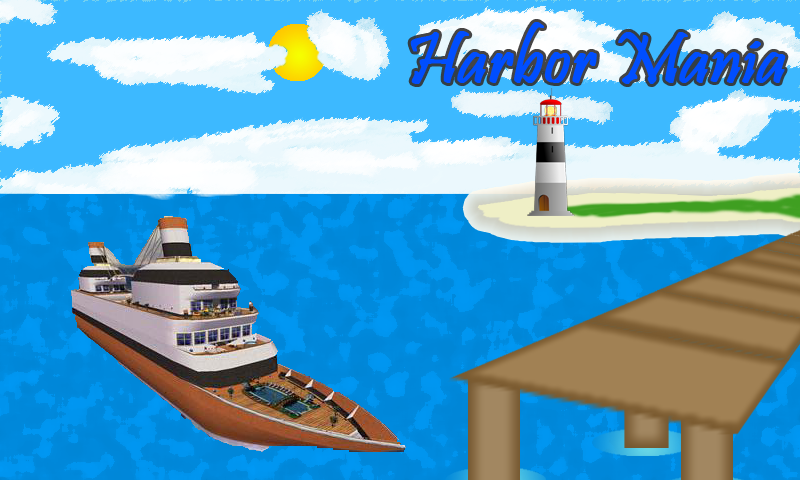
<style>
.page{position:relative;width:800px;height:480px}
.page>*{position:absolute;margin:0}
.t1{font:71.9px "Pristina-Regular";color:#004eff;font-weight:bold}
</style>
<div class="page">
<p class="t1" style="left:410px;top:22px;width:376px;height:62px">Harbor Mania</p>
</div>
